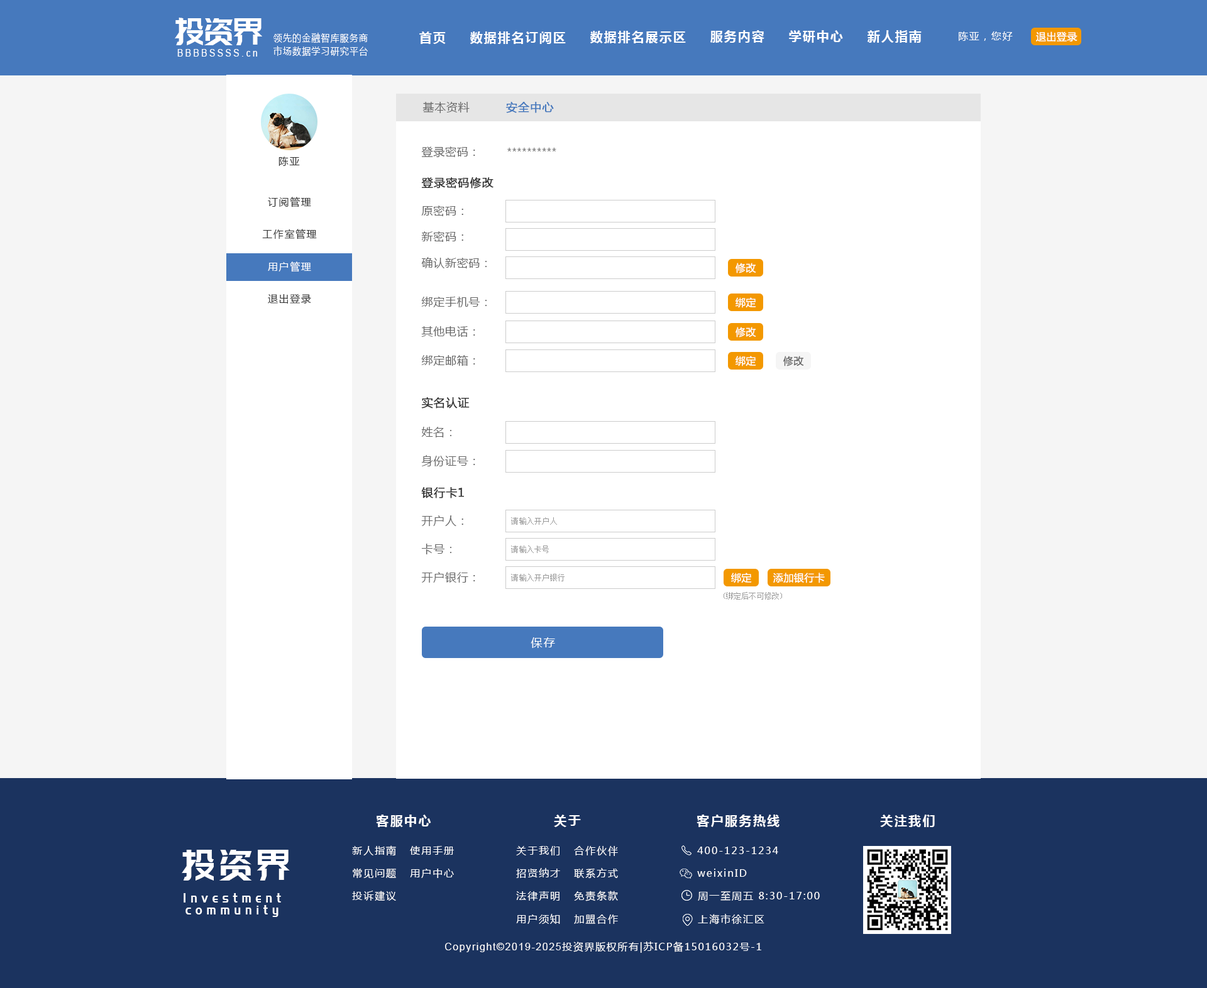
<style>
.page{position:relative;width:1207px;height:988px;background:#ffffff}
.page>*{position:absolute;margin:0}
.t1{font:37.4px "PangMenZhengDao";color:#ffffff;scale:0.86 1}
.t2{font:10.1px "MicrosoftYaHei";letter-spacing:0.1em;color:#ffffff;scale:0.86 1}
.t3{font:12.6px "MicrosoftYaHei-Bold";letter-spacing:0.1em;color:#ffffff}
.t4{font:10.1px "MicrosoftYaHei";letter-spacing:0.1em;color:#ffffff}
.t5{font:10.1px "MicrosoftYaHei";letter-spacing:0.03em;color:#ffffff}
.t6{font:10.1px "ArialMT";letter-spacing:0.26em;color:#ffffff;scale:0.86 1}
.t7{font:11.3px "MicrosoftYaHei";letter-spacing:0.04em;color:#666666}
.t8{font:11.3px "MicrosoftYaHei";letter-spacing:0.04em;color:#4679bd;font-weight:bold}
.t9{font:10.1px "MicrosoftYaHei";letter-spacing:0.04em;color:#666666}
.t10{font:10.1px "MicrosoftYaHei";letter-spacing:0.1em;color:#333333}
.t11{font:11.3px "MicrosoftYaHei";letter-spacing:0.04em;color:#333333;font-weight:bold}
.t12{font:10.1px "MicrosoftYaHei";letter-spacing:0.03em;color:#666666}
.t13{font:7.5px "SimSun";letter-spacing:0.02em;color:#999999}
.t14{font:11.3px "MicrosoftYaHei";letter-spacing:0.12em;color:#ffffff}
.t15{font:12.6px "MicrosoftYaHei-Bold";letter-spacing:0.12em;color:#ffffff}
.t16{font:10.1px "MicrosoftYaHei";letter-spacing:0.12em;color:#ffffff}
.t17{font:42.7px "PangMenZhengDao";letter-spacing:0.1em;color:#ffffff;scale:0.86 1}
.t18{font:13.6px/11.9px "PangMenZhengDao";letter-spacing:0.36em;color:#ffffff;scale:0.86 1}
.t19{font:10.1px "ArialMT";letter-spacing:0.1em;color:#ffffff}
</style>
<div class="page">
<p class="t1" style="left:175px;top:18px;width:87px;height:27px">投资界</p>
<p class="t2" style="left:273px;top:33px;width:95px;height:10px">领先的金融智库服务商</p>
<p class="t3" style="left:419px;top:31px;width:27px;height:13px">首页</p>
<p class="t3" style="left:470px;top:31px;width:96px;height:13px">数据排名订阅区</p>
<p class="t3" style="left:590px;top:31px;width:96px;height:12px">数据排名展示区</p>
<p class="t3" style="left:710px;top:30px;width:54px;height:13px">服务内容</p>
<p class="t3" style="left:789px;top:30px;width:54px;height:13px">学研中心</p>
<p class="t3" style="left:867px;top:30px;width:54px;height:13px">新人指南</p>
<p class="t4" style="left:959px;top:31px;width:54px;height:10px">陈亚，您好</p>
<p class="t5" style="left:1036px;top:31px;width:41px;height:10px">退出登录</p>
<p class="t6" style="left:177px;top:49px;width:80px;height:8px">BBBBSSSS.cn</p>
<p class="t2" style="left:273px;top:46px;width:95px;height:10px">市场数据学习研究平台</p>
<p class="t7" style="left:422px;top:102px;width:48px;height:11px">基本资料</p>
<p class="t8" style="left:506px;top:102px;width:48px;height:11px">安全中心</p>
<p class="t7" style="left:421px;top:146px;width:54px;height:12px">登录密码：</p>
<p class="t9" style="left:507px;top:148px;width:49px;height:3px">**********</p>
<p class="t10" style="left:278px;top:157px;width:22px;height:9px">陈亚</p>
<p class="t11" style="left:421px;top:177px;width:72px;height:12px">登录密码修改</p>
<p class="t10" style="left:268px;top:197px;width:43px;height:10px">订阅管理</p>
<p class="t7" style="left:421px;top:206px;width:42px;height:10px">原密码：</p>
<p class="t10" style="left:262px;top:229px;width:55px;height:10px">工作室管理</p>
<p class="t7" style="left:421px;top:231px;width:42px;height:11px">新密码：</p>
<p class="t7" style="left:421px;top:257px;width:66px;height:11px">确认新密码：</p>
<p class="t4" style="left:268px;top:261px;width:43px;height:11px">用户管理</p>
<p class="t5" style="left:735px;top:263px;width:21px;height:10px">修改</p>
<p class="t10" style="left:268px;top:294px;width:43px;height:10px">退出登录</p>
<p class="t7" style="left:421px;top:297px;width:66px;height:10px">绑定手机号：</p>
<p class="t5" style="left:735px;top:297px;width:21px;height:11px">绑定</p>
<p class="t7" style="left:421px;top:326px;width:54px;height:11px">其他电话：</p>
<p class="t5" style="left:735px;top:327px;width:21px;height:11px">修改</p>
<p class="t7" style="left:421px;top:355px;width:54px;height:11px">绑定邮箱：</p>
<p class="t5" style="left:735px;top:356px;width:21px;height:10px">绑定</p>
<p class="t12" style="left:783px;top:356px;width:21px;height:10px">修改</p>
<p class="t11" style="left:421px;top:397px;width:49px;height:12px">实名认证</p>
<p class="t7" style="left:421px;top:427px;width:31px;height:10px">姓名：</p>
<p class="t7" style="left:421px;top:455px;width:54px;height:11px">身份证号：</p>
<p class="t11" style="left:421px;top:487px;width:43px;height:11px">银行卡1</p>
<p class="t7" style="left:421px;top:515px;width:42px;height:11px">开户人：</p>
<p class="t13" style="left:511px;top:517px;width:46px;height:8px">请输入开户人</p>
<p class="t7" style="left:421px;top:544px;width:31px;height:10px">卡号：</p>
<p class="t13" style="left:511px;top:546px;width:38px;height:7px">请输入卡号</p>
<p class="t7" style="left:421px;top:572px;width:54px;height:11px">开户银行：</p>
<p class="t13" style="left:511px;top:574px;width:53px;height:7px">请输入开户银行</p>
<p class="t5" style="left:731px;top:573px;width:21px;height:10px">绑定</p>
<p class="t5" style="left:773px;top:573px;width:52px;height:10px">添加银行卡</p>
<p class="t13" style="left:723px;top:592px;width:59px;height:8px">(绑定后不可修改)</p>
<p class="t14" style="left:530px;top:637px;width:25px;height:11px">保存</p>
<p class="t15" style="left:376px;top:815px;width:55px;height:12px">客服中心</p>
<p class="t15" style="left:554px;top:815px;width:27px;height:12px">关于</p>
<p class="t15" style="left:696px;top:815px;width:83px;height:12px">客户服务热线</p>
<p class="t15" style="left:880px;top:815px;width:55px;height:12px">关注我们</p>
<p class="t16" style="left:352px;top:845px;width:44px;height:11px">新人指南</p>
<p class="t17" style="left:182px;top:850px;width:108px;height:31px">投资界</p>
<p class="t16" style="left:410px;top:846px;width:44px;height:9px">使用手册</p>
<p class="t16" style="left:516px;top:846px;width:43px;height:9px">关于我们</p>
<p class="t16" style="left:574px;top:846px;width:44px;height:10px">合作伙伴</p>
<p class="t16" style="left:697px;top:847px;width:81px;height:7px">400-123-1234</p>
<p class="t16" style="left:353px;top:868px;width:43px;height:11px">常见问题</p>
<p class="t16" style="left:410px;top:869px;width:44px;height:9px">用户中心</p>
<p class="t16" style="left:516px;top:868px;width:44px;height:10px">招贤纳才</p>
<p class="t16" style="left:574px;top:868px;width:44px;height:11px">联系方式</p>
<p class="t16" style="left:697px;top:869px;width:50px;height:8px">weixinID</p>
<p class="t18" style="left:184px;top:893px;width:97px;height:24px;text-align:center">Investment<br>community</p>
<p class="t16" style="left:352px;top:891px;width:44px;height:10px">投诉建议</p>
<p class="t16" style="left:516px;top:891px;width:43px;height:10px">法律声明</p>
<p class="t16" style="left:574px;top:891px;width:44px;height:10px">免责条款</p>
<p class="t16" style="left:698px;top:891px;width:122px;height:10px">周一至周五 8:30-17:00</p>
<p class="t16" style="left:516px;top:914px;width:44px;height:10px">用户须知</p>
<p class="t16" style="left:574px;top:915px;width:44px;height:9px">加盟合作</p>
<p class="t16" style="left:698px;top:914px;width:66px;height:11px">上海市徐汇区</p>
<p class="t4" style="left:445px;top:942px;width:316px;height:11px"><span class="t19">Copyright©2019-2025</span>投资界版权所有|苏ICP备15016032号-1</p>
</div>
